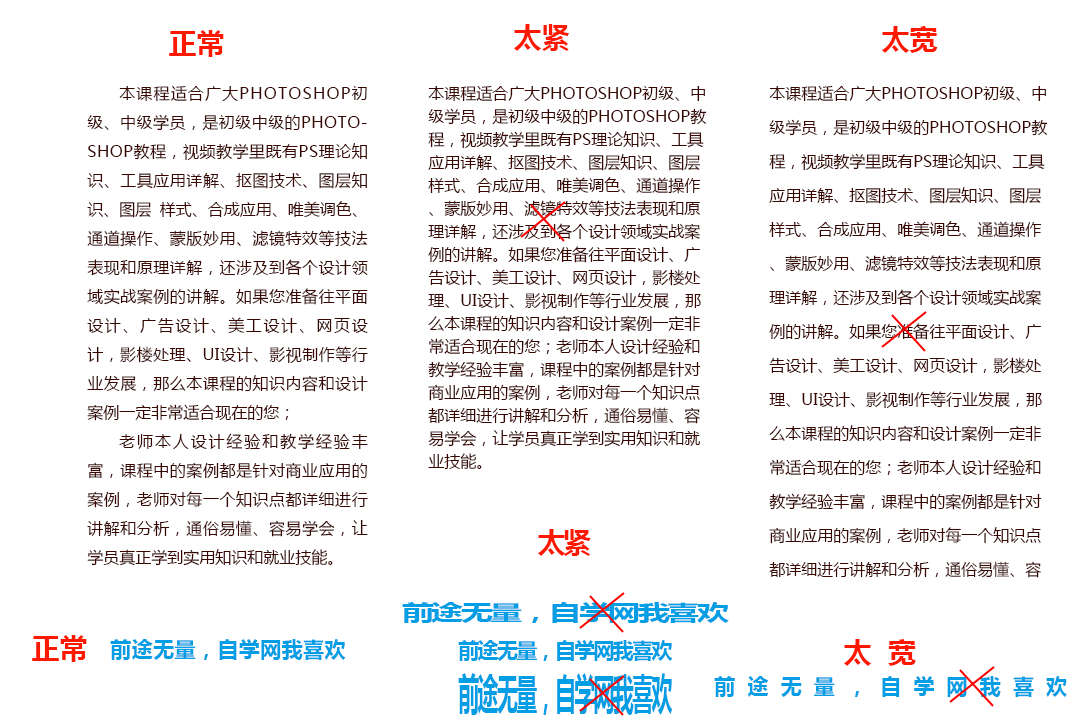
<style>
.page{position:relative;width:1079px;height:720px;background:#ffffff}
.page>*{position:absolute;margin:0}
.t1{font:28px "MicrosoftYaHei-Bold";color:#ff1800;text-transform:uppercase}
.t2{font:16px/29px "MicrosoftYaHei";color:#380702;text-transform:uppercase}
.t3{font:16px/23px "MicrosoftYaHei";color:#380702;text-transform:uppercase}
.t4{font:16px/34px "MicrosoftYaHei";color:#380702;text-transform:uppercase}
.t5{font:28px "MicrosoftYaHei-Bold";letter-spacing:-0.08em;color:#ff1800;text-transform:uppercase}
.t6{font:21px "MicrosoftYaHei-Bold";letter-spacing:-0.08em;color:#059de4;text-transform:uppercase;scale:1.53 1}
.t7{font:21px "MicrosoftYaHei-Bold";letter-spacing:0.02em;color:#059de4;text-transform:uppercase}
.t8{font:21px "MicrosoftYaHei-Bold";letter-spacing:-0.08em;color:#059de4;text-transform:uppercase}
.t9{font:28px "MicrosoftYaHei-Bold";letter-spacing:0.6em;color:#ff1800;text-transform:uppercase}
.t10{font:41.8px "MicrosoftYaHei-Bold";letter-spacing:-0.08em;color:#059de4;text-transform:uppercase;scale:0.5 1}
.t11{font:21px "MicrosoftYaHei-Bold";letter-spacing:0.58em;color:#059de4;text-transform:uppercase}
</style>
<div class="page">
<p class="t1" style="left:169px;top:30px;width:55px;height:27px">正常</p>
<p class="t1" style="left:513px;top:24px;width:56px;height:27px">太紧</p>
<p class="t1" style="left:881px;top:26px;width:57px;height:27px">太宽</p>
<p class="t2" style="left:87px;top:85px;width:281px;height:481px;text-align:justify">本课程适合广大Photoshop初级、中级学员，是初级中级的Photoshop教程，视频教学里既有PS理论知识、工具应用详解、抠图技术、图层知识、图层 样式、合成应用、唯美调色、通道操作、蒙版妙用、滤镜特效等技法表现和原理详解，还涉及到各个设计领域实战案例的讲解。如果您准备往平面设计、广告设计、美工设计、网页设计，影楼处理、UI设计、影视制作等行业发展，那么本课程的知识内容和设计案例一定非常适合现在的您；<br>老师本人设计经验和教学经验丰富，课程中的案例都是针对商业应用的案例，老师对每一个知识点都详细进行讲解和分析，通俗易懂、容易学会，让学员真正学到实用知识和就业技能。</p>
<p class="t3" style="left:428px;top:85px;width:279px;height:384px">本课程适合广大Photoshop初级、中级学员，是初级中级的Photoshop教程，视频教学里既有PS理论知识、工具应用详解、抠图技术、图层知识、图层 样式、合成应用、唯美调色、通道操作、蒙版妙用、滤镜特效等技法表现和原理详解，还涉及到各个设计领域实战案例的讲解。如果您准备往平面设计、广告设计、美工设计、网页设计，影楼处理、UI设计、影视制作等行业发展，那么本课程的知识内容和设计案例一定非常适合现在的您；老师本人设计经验和教学经验丰富，课程中的案例都是针对商业应用的案例，老师对每一个知识点都详细进行讲解和分析，通俗易懂、容易学会，让学员真正学到实用知识和就业技能。</p>
<p class="t4" style="left:769px;top:85px;width:279px;height:493px">本课程适合广大Photoshop初级、中级学员，是初级中级的Photoshop教程，视频教学里既有PS理论知识、工具应用详解、抠图技术、图层知识、图层 样式、合成应用、唯美调色、通道操作、蒙版妙用、滤镜特效等技法表现和原理详解，还涉及到各个设计领域实战案例的讲解。如果您准备往平面设计、广告设计、美工设计、网页设计，影楼处理、UI设计、影视制作等行业发展，那么本课程的知识内容和设计案例一定非常适合现在的您；老师本人设计经验和教学经验丰富，课程中的案例都是针对商业应用的案例，老师对每一个知识点都详细进行讲解和分析，通俗易懂、容易学会，让学员真正学到实用知识和就业技能。</p>
<p class="t5" style="left:537px;top:529px;width:54px;height:27px">太紧</p>
<p class="t6" style="left:402px;top:602px;width:327px;height:21px">前途无量，自学网我喜欢</p>
<p class="t1" style="left:32px;top:635px;width:55px;height:27px">正常</p>
<p class="t7" style="left:110px;top:639px;width:236px;height:21px">前途无量，自学网我喜欢</p>
<p class="t8" style="left:458px;top:640px;width:215px;height:21px">前途无量，自学网我喜欢</p>
<p class="t9" style="left:843px;top:639px;width:73px;height:27px">太宽</p>
<p class="t10" style="left:458px;top:673px;width:215px;height:42px">前途无量，自学网我喜欢</p>
<p class="t11" style="left:714px;top:676px;width:353px;height:21px">前途无量，自学网我喜欢</p>
</div>
